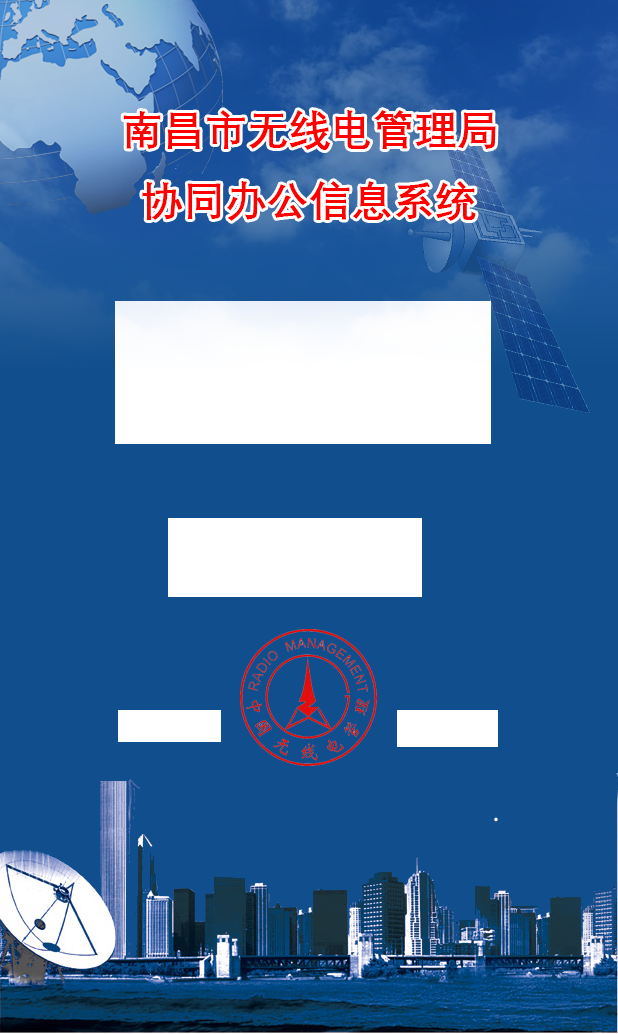
<style>
.page{position:relative;width:618px;height:1034px;background:#114e8d}
.page>*{position:absolute;margin:0}
.t1{font:42px "DengXian-Bold";color:#ff0000}
</style>
<div class="page">
<p class="t1" style="left:123px;top:110px;width:373px;height:40px">南昌市无线电管理局</p>
<p class="t1" style="left:142px;top:181px;width:334px;height:40px">协同办公信息系统</p>
</div>
